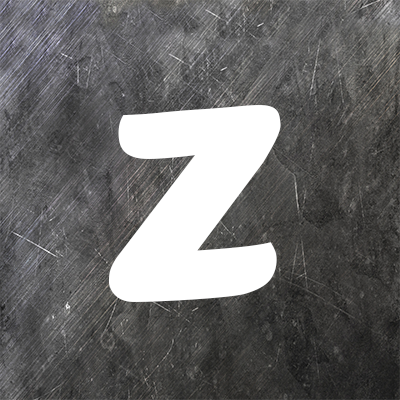
<style>
.page{position:relative;width:400px;height:400px}
.page>*{position:absolute;margin:0}
.t1{font:240.5px "Puma-DarrenRegular";color:#ffffff;font-weight:bold;scale:1.47 1}
</style>
<div class="page">
<p class="t1" style="left:108px;top:105px;width:173px;height:197px">Z</p>
</div>
